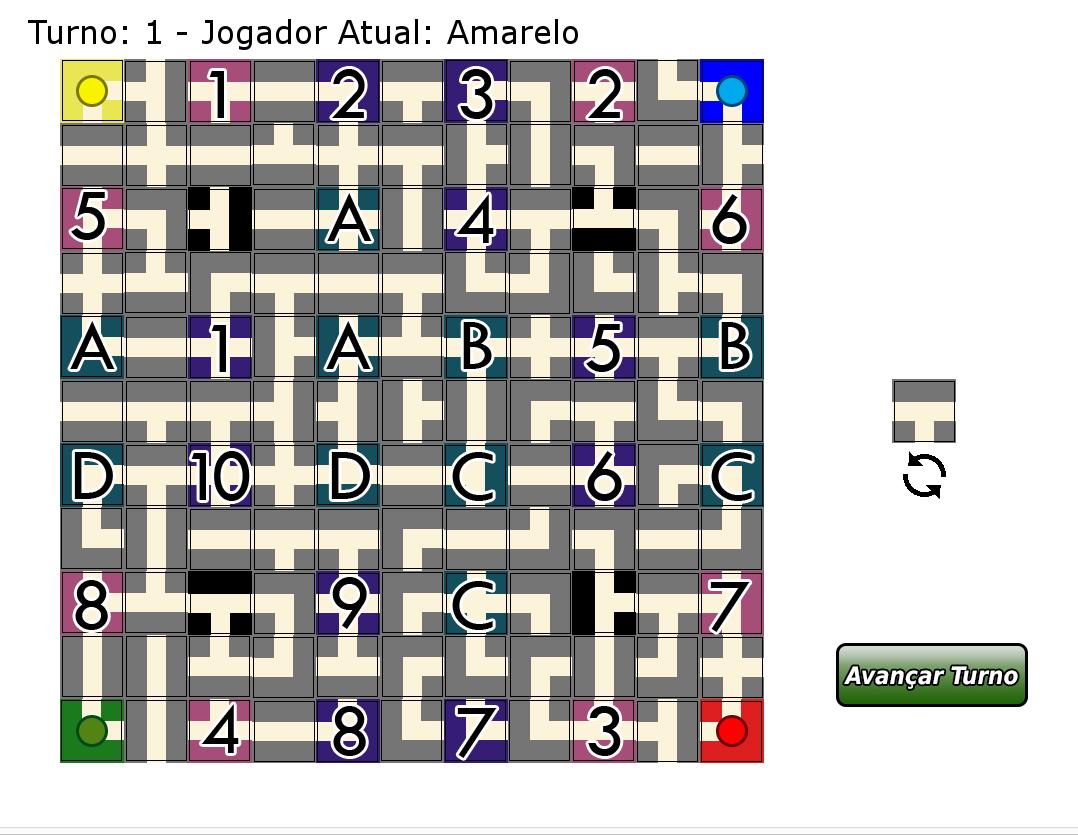
<style>
.page{position:relative;width:1078px;height:835px;background:#ffffff}
.page>*{position:absolute;margin:0}
.t1{font:75px "TwCenMT-Regular";color:#000000}
.t2{font:75px "TwCenMT-Regular";letter-spacing:-0.165em;color:#000000}
</style>
<div class="page">
<p class="t1" style="left:209px;top:71px;width:15px;height:47px">1</p>
<p class="t1" style="left:332px;top:69px;width:33px;height:49px">2</p>
<p class="t1" style="left:460px;top:69px;width:33px;height:50px">3</p>
<p class="t1" style="left:588px;top:69px;width:33px;height:49px">2</p>
<p class="t1" style="left:71px;top:192px;width:34px;height:48px">5</p>
<p class="t1" style="left:327px;top:193px;width:45px;height:48px">A</p>
<p class="t1" style="left:456px;top:194px;width:38px;height:49px">4</p>
<p class="t1" style="left:712px;top:194px;width:35px;height:50px">6</p>
<p class="t1" style="left:70px;top:321px;width:45px;height:48px">A</p>
<p class="t1" style="left:211px;top:325px;width:15px;height:47px">1</p>
<p class="t1" style="left:326px;top:321px;width:45px;height:48px">A</p>
<p class="t1" style="left:463px;top:322px;width:29px;height:47px">B</p>
<p class="t1" style="left:586px;top:324px;width:34px;height:48px">5</p>
<p class="t1" style="left:721px;top:322px;width:29px;height:47px">B</p>
<p class="t1" style="left:74px;top:452px;width:39px;height:47px">D</p>
<p class="t2" style="left:191px;top:451px;width:59px;height:50px">10</p>
<p class="t1" style="left:331px;top:452px;width:39px;height:47px">D</p>
<p class="t1" style="left:452px;top:452px;width:41px;height:49px">C</p>
<p class="t1" style="left:587px;top:451px;width:35px;height:50px">6</p>
<p class="t1" style="left:711px;top:452px;width:41px;height:49px">C</p>
<p class="t1" style="left:75px;top:580px;width:33px;height:50px">8</p>
<p class="t1" style="left:332px;top:577px;width:35px;height:52px">9</p>
<p class="t1" style="left:452px;top:581px;width:41px;height:49px">C</p>
<p class="t1" style="left:710px;top:582px;width:40px;height:50px">7</p>
<p class="t1" style="left:201px;top:704px;width:38px;height:49px">4</p>
<p class="t1" style="left:333px;top:706px;width:33px;height:50px">8</p>
<p class="t1" style="left:457px;top:708px;width:40px;height:50px">7</p>
<p class="t1" style="left:588px;top:706px;width:33px;height:50px">3</p>
</div>
